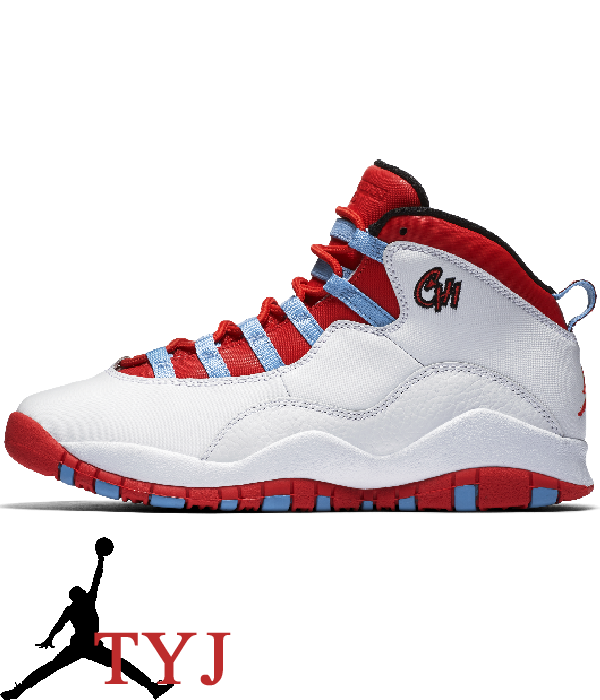
<style>
.page{position:relative;width:600px;height:700px;background:#ffffff}
.page>*{position:absolute;margin:0}
.t1{font:76px "MongolianBaiti";letter-spacing:0.01em;color:#bd2c2c;font-weight:bold}
</style>
<div class="page">
<p class="t1" style="left:94px;top:632px;width:137px;height:54px">TYJ</p>
</div>
